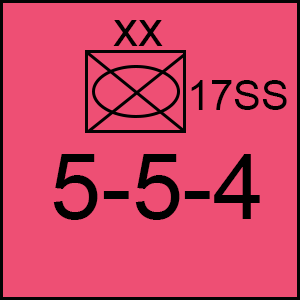
<style>
.page{position:relative;width:300px;height:300px;background:#ee4f74}
.page>*{position:absolute;margin:0}
.t1{font:50px "ArialMT";color:#000000}
.t2{font:41.7px "ArialMT";color:#000000}
.t3{font:91.7px "ArialMT";color:#000000}
</style>
<div class="page">
<p class="t1" style="left:113px;top:20px;width:50px;height:26px">xx</p>
<p class="t2" style="left:191px;top:80px;width:96px;height:30px">17SS</p>
<p class="t3" style="left:53px;top:154px;width:207px;height:66px">5-5-4</p>
</div>
